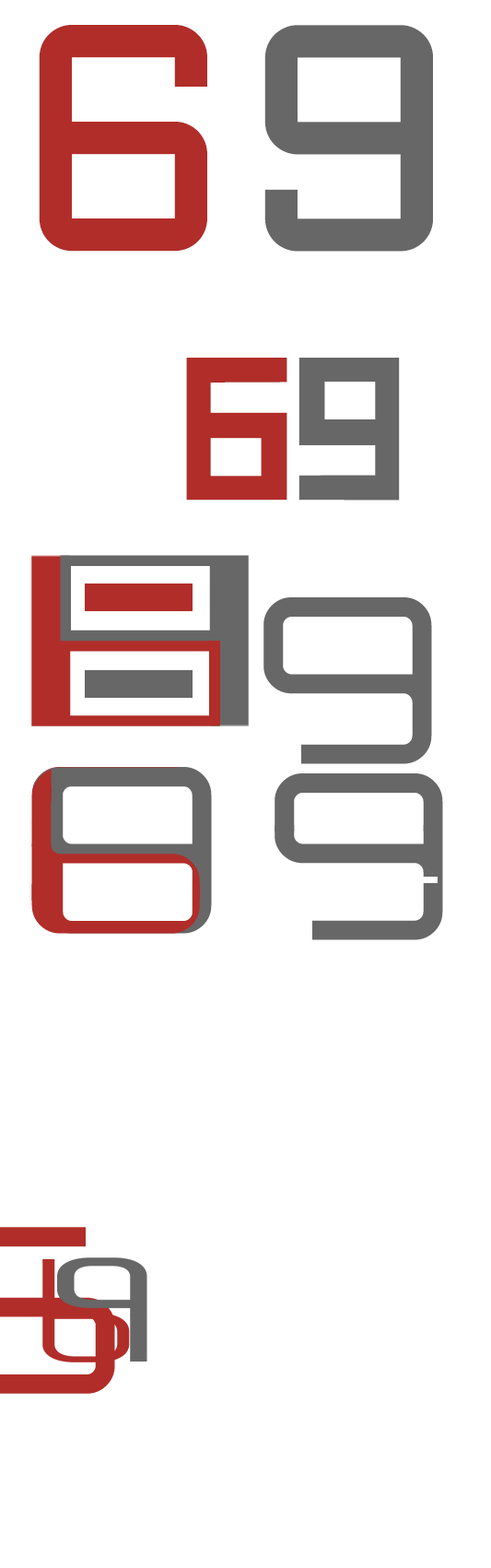
<style>
.page{position:relative;width:491px;height:1568px;background:#ffffff}
.page>*{position:absolute;margin:0}
.t1{font:322.6px "Aldrich-Regular";color:#b12d29}
.t2{font:322.6px "Aldrich-Regular";color:#676767}
.t3{font:322.6px "Geo-Regular";color:#b12d29}
.t4{font:322.6px "Geo-Regular";color:#676767}
</style>
<div class="page">
<p class="t1" style="left:39px;top:25px;width:168px;height:227px">6</p>
<p class="t2" style="left:265px;top:25px;width:168px;height:227px">9</p>
<p class="t3" style="left:186px;top:358px;width:102px;height:143px">6</p>
<p class="t4" style="left:299px;top:358px;width:101px;height:143px">9</p>
</div>
